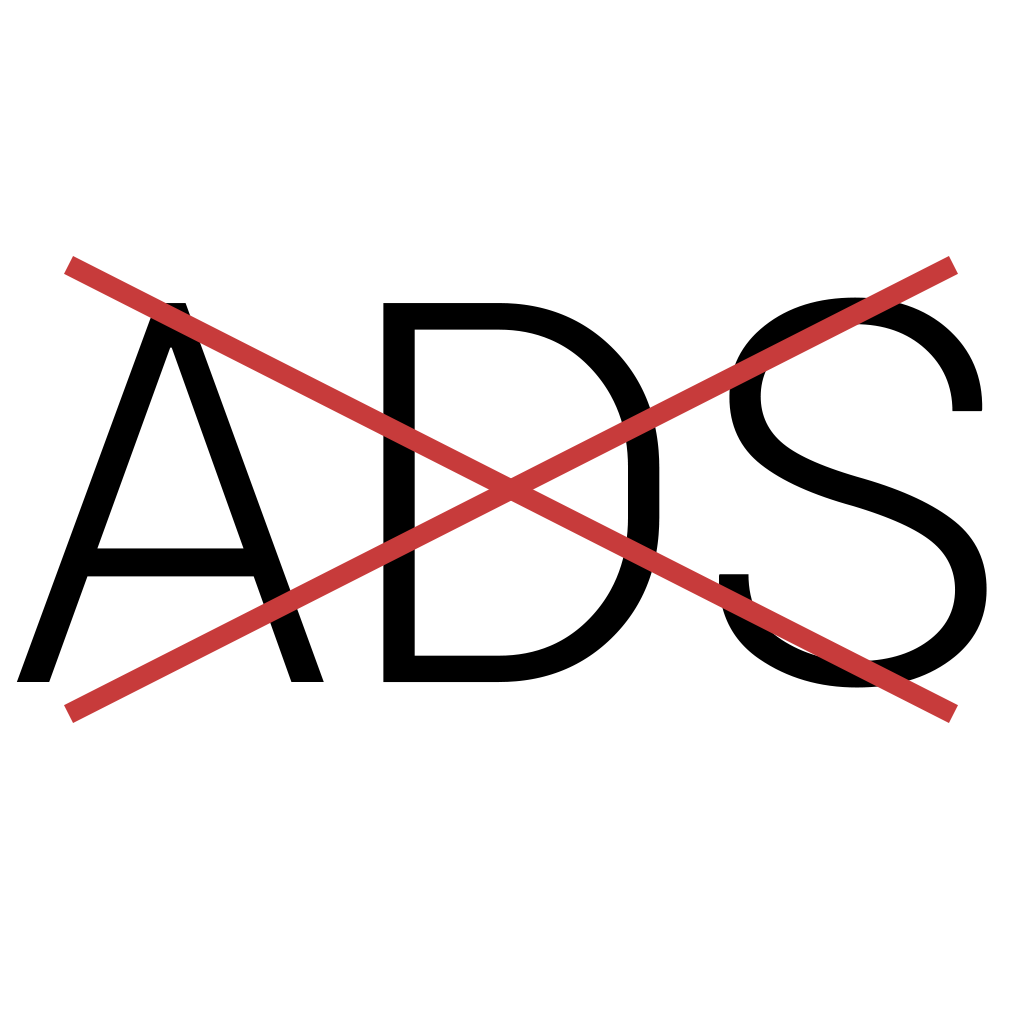
<style>
.page{position:relative;width:1024px;height:1024px;background:#ffffff}
.page>*{position:absolute;margin:0}
.t1{font:533.3px "Roboto-Light";color:#000000}
</style>
<div class="page">
<p class="t1" style="left:16px;top:297px;width:971px;height:391px">ADS</p>
</div>
